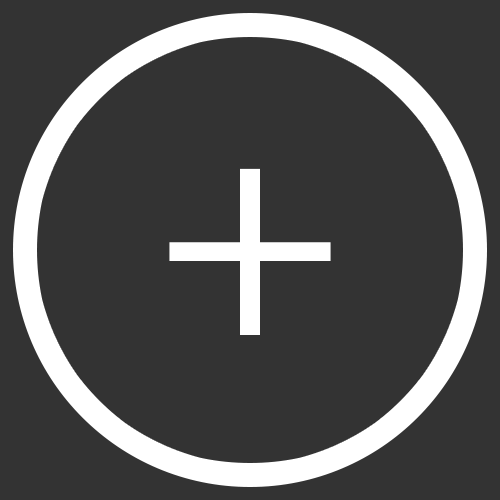
<style>
.page{position:relative;width:500px;height:500px;background:#333333}
.page>*{position:absolute;margin:0}
.t1{font:312.2px "MyriadPro-Regular";color:#ffffff}
</style>
<div class="page">
<p class="t1" style="left:169px;top:168px;width:162px;height:167px">+</p>
</div>
